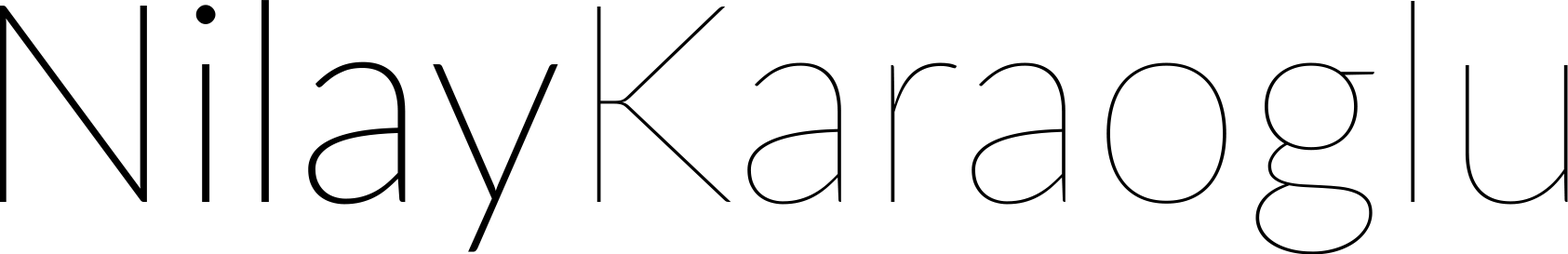
<style>
.page{position:relative;width:1568px;height:254px;background:#ffffff}
.page>*{position:absolute;margin:0}
.t1{font:279.2px "Lato-Hairline";color:#000000}
.t2{font:279.2px "Lato-Thin";color:#000000}
</style>
<div class="page">
<p class="t1" style="left:0px;top:0px;width:1568px;height:255px"><span class="t2">Nilay</span>Karaoglu</p>
</div>
